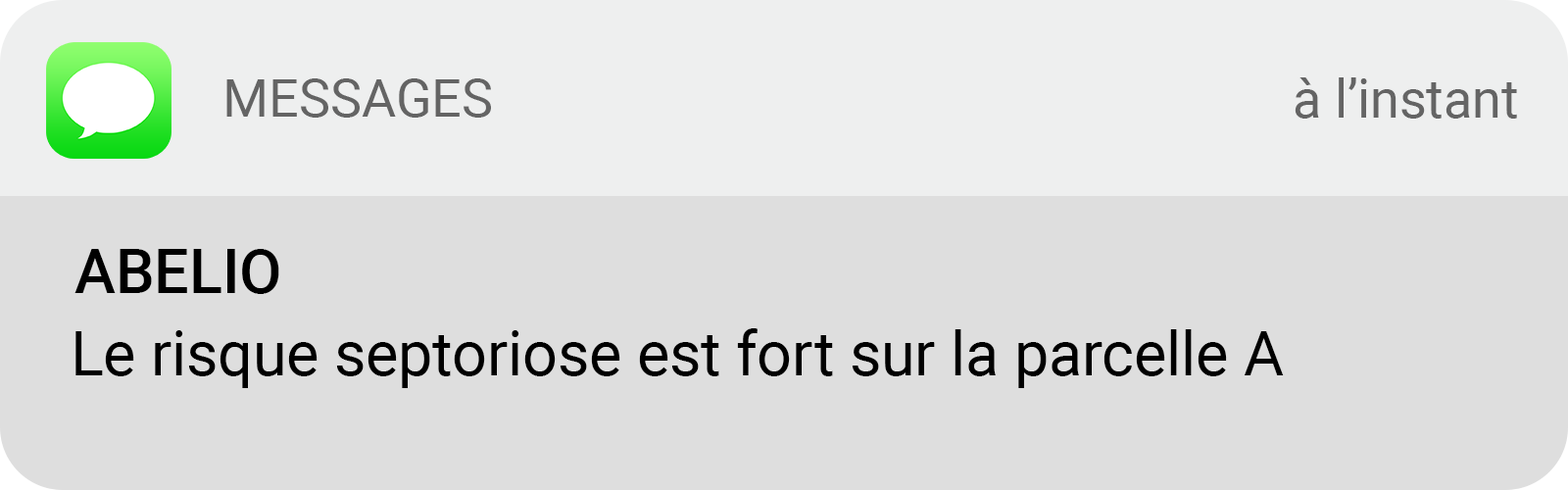
<style>
.page{position:relative;width:1568px;height:490px;background:#dedede}
.page>*{position:absolute;margin:0}
.t1{font:53.1px "Roboto-Regular";letter-spacing:-0.005em;color:#646464}
.t2{font:61.2px "Roboto-Medium";color:#000000}
.t3{font:61.2px "Roboto-Regular";color:#000000}
</style>
<div class="page">
<p class="t1" style="left:1295px;top:77px;width:222px;height:42px">à l’instant</p>
<p class="t1" style="left:226px;top:78px;width:265px;height:40px">MESSAGES</p>
<p class="t2" style="left:74px;top:249px;width:205px;height:45px">ABELIO</p>
<p class="t3" style="left:75px;top:328px;width:1209px;height:60px">Le risque septoriose est fort sur la parcelle A</p>
</div>
